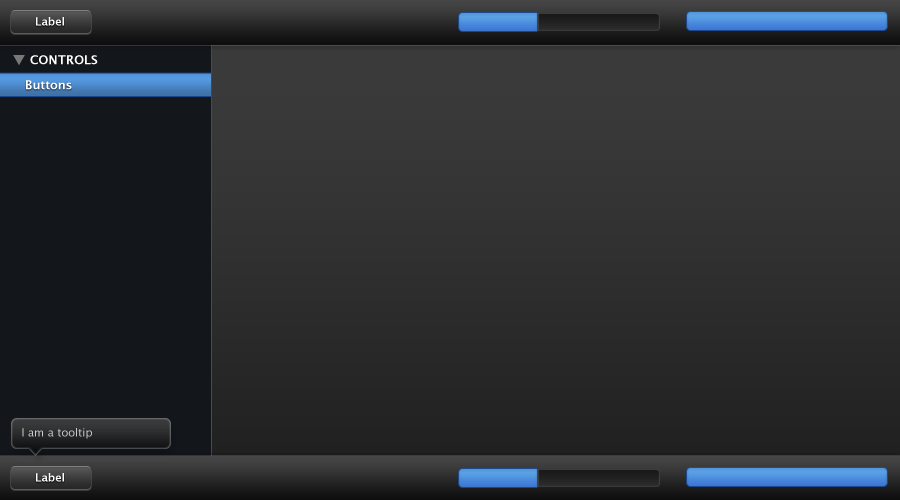
<style>
.page{position:relative;width:900px;height:500px}
.page>*{position:absolute;margin:0}
.t1{font:11px "LucidaGrande-Bold";color:#ffffff}
.t2{font:12px "LucidaGrande-Bold";color:#ffffff}
.t3{font:11px "LucidaGrande";color:#cccccd}
</style>
<div class="page">
<p class="t1" style="left:36px;top:17px;width:28px;height:9px">Label</p>
<p class="t2" style="left:30px;top:55px;width:68px;height:10px">CONTROLS</p>
<p class="t2" style="left:26px;top:80px;width:46px;height:10px">Buttons</p>
<p class="t3" style="left:22px;top:428px;width:70px;height:11px">I am a tooltip</p>
<p class="t1" style="left:36px;top:473px;width:28px;height:9px">Label</p>
</div>
